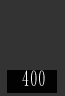
<style>
.page{position:relative;width:65px;height:96px;background:#333333}
.page>*{position:absolute;margin:0}
.t1{font:22.4px "YouYuan";letter-spacing:0.1em;color:#fefefe;scale:0.61 1}
</style>
<div class="page">
<p class="t1" style="left:22px;top:70px;width:23px;height:16px">400</p>
</div>
